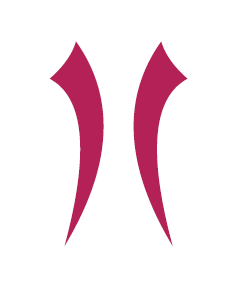
<style>
.page{position:relative;width:237px;height:288px;background:#ffffff}
.page>*{position:absolute;margin:0}
.t1{font:250px "AsianDelight";letter-spacing:0.1em;color:#b42157;scale:0.93 1}
</style>
<div class="page">
<p class="t1" style="left:49px;top:41px;width:55px;height:205px">I</p>
<p class="t1" style="left:133px;top:41px;width:55px;height:205px;rotate:180deg">I</p>
</div>
